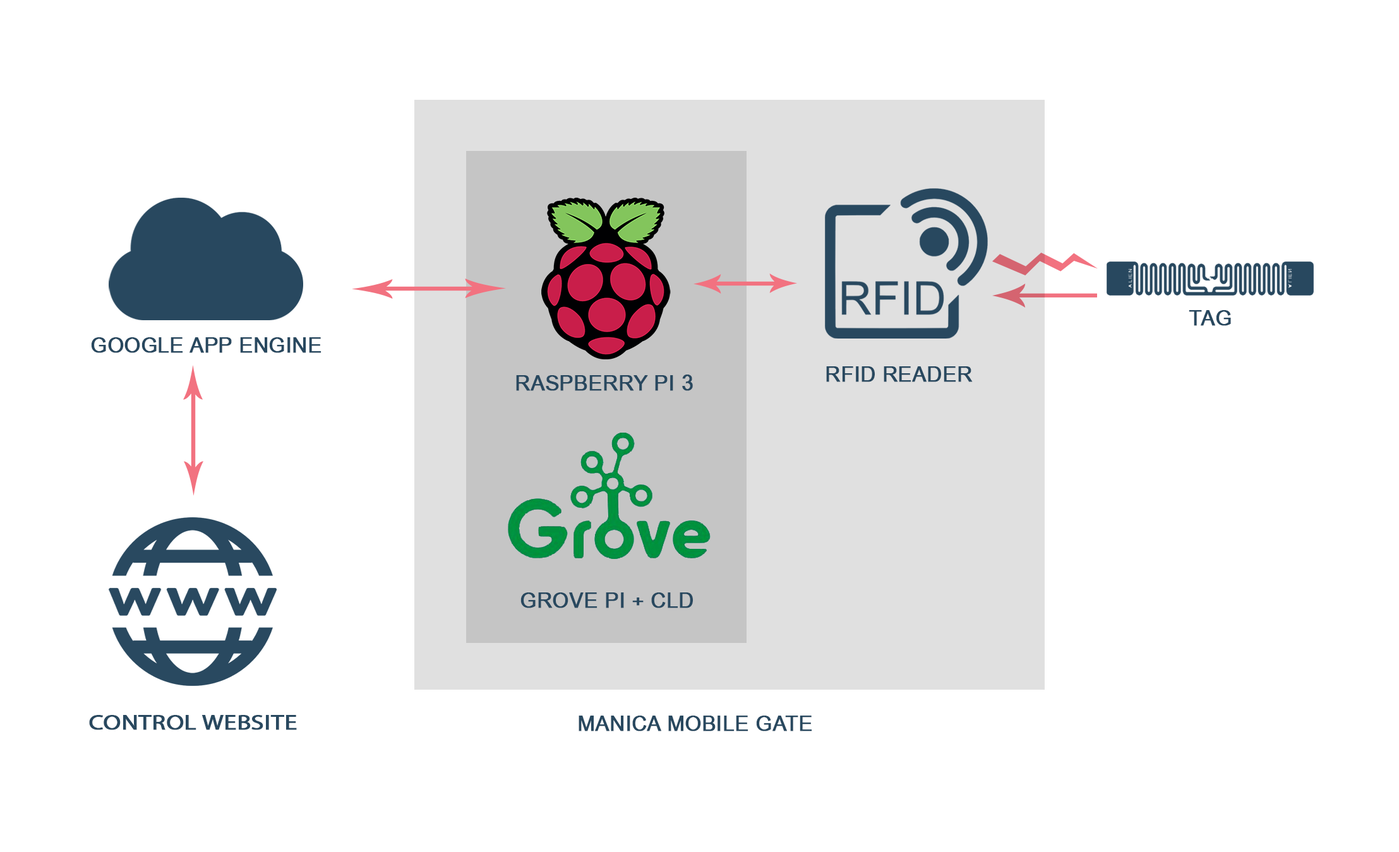
<style>
.page{position:relative;width:1399px;height:852px;background:#ffffff}
.page>*{position:absolute;margin:0}
.t1{font:21.1px "ArialNarrow";color:#28485f;text-transform:uppercase;font-weight:bold;scale:1.2 1}
.t2{font:21.1px "ArialNarrow";color:#28485f;text-transform:uppercase;font-weight:bold;scale:1.19 1}
.t3{font:21.1px "MyriadPro-Regular";color:#28485f;text-transform:uppercase;font-weight:bold;scale:1.2 1}
</style>
<div class="page">
<p class="t1" style="left:1189px;top:310px;width:42px;height:16px">TAG</p>
<p class="t2" style="left:91px;top:337px;width:231px;height:16px">google app engine</p>
<p class="t1" style="left:516px;top:375px;width:177px;height:16px">raspberry Pi 3</p>
<p class="t1" style="left:826px;top:366px;width:147px;height:16px">RFID Reader</p>
<p class="t1" style="left:521px;top:593px;width:172px;height:15px">Grove Pi + CLD</p>
<p class="t3" style="left:89px;top:715px;width:208px;height:15px">Control website</p>
<p class="t1" style="left:579px;top:716px;width:233px;height:16px">manica mobile gate</p>
</div>
